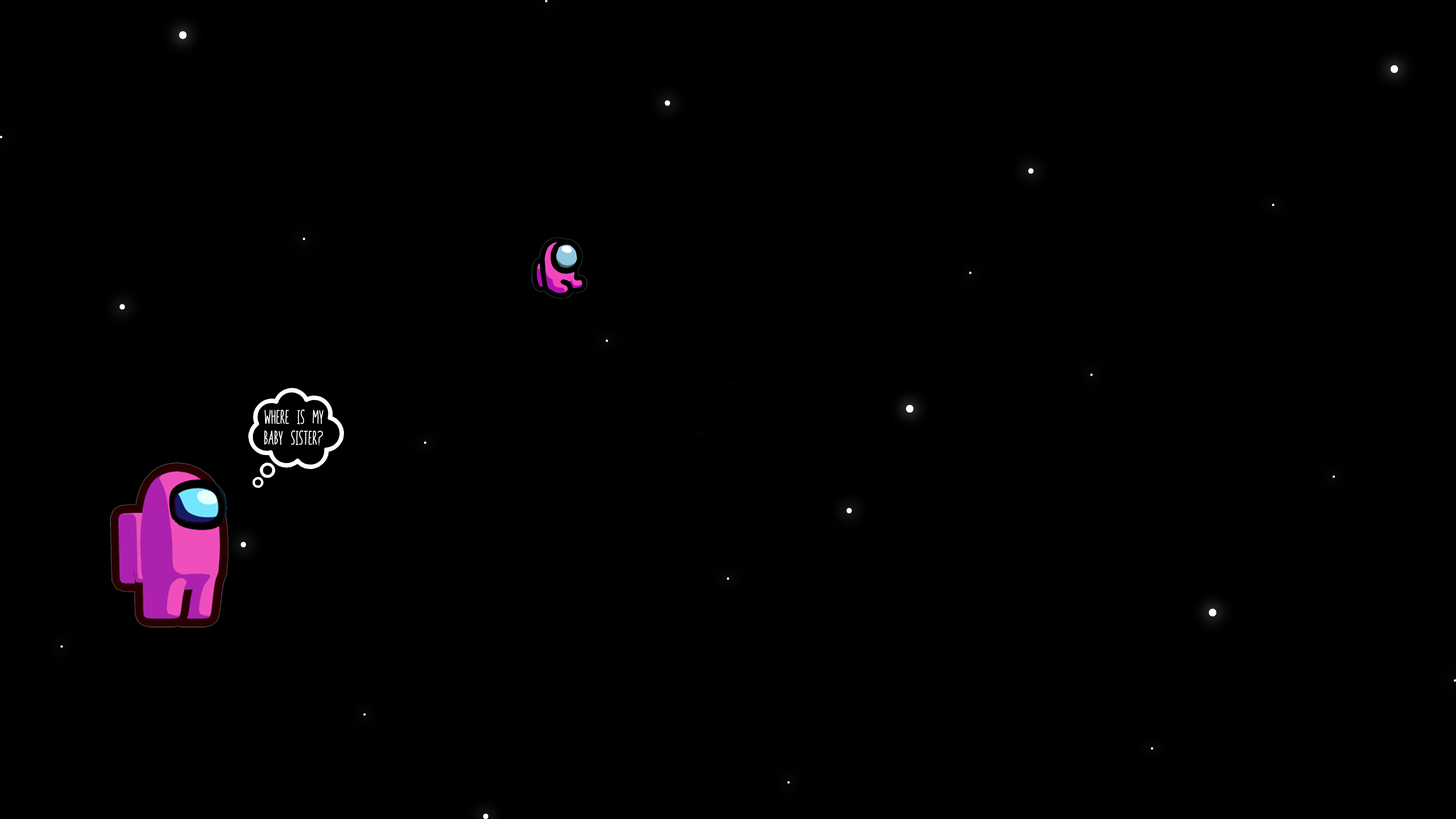
<style>
.page{position:relative;width:1456px;height:819px;background:#000000}
.page>*{position:absolute;margin:0}
.t1{font:18.2px "In_your_face__Joffrey__";color:#ffffff}
</style>
<div class="page">
<p class="t1" style="left:264px;top:409px;width:59px;height:15px">Where is my</p>
<p class="t1" style="left:264px;top:430px;width:59px;height:16px">baby sister?</p>
</div>
